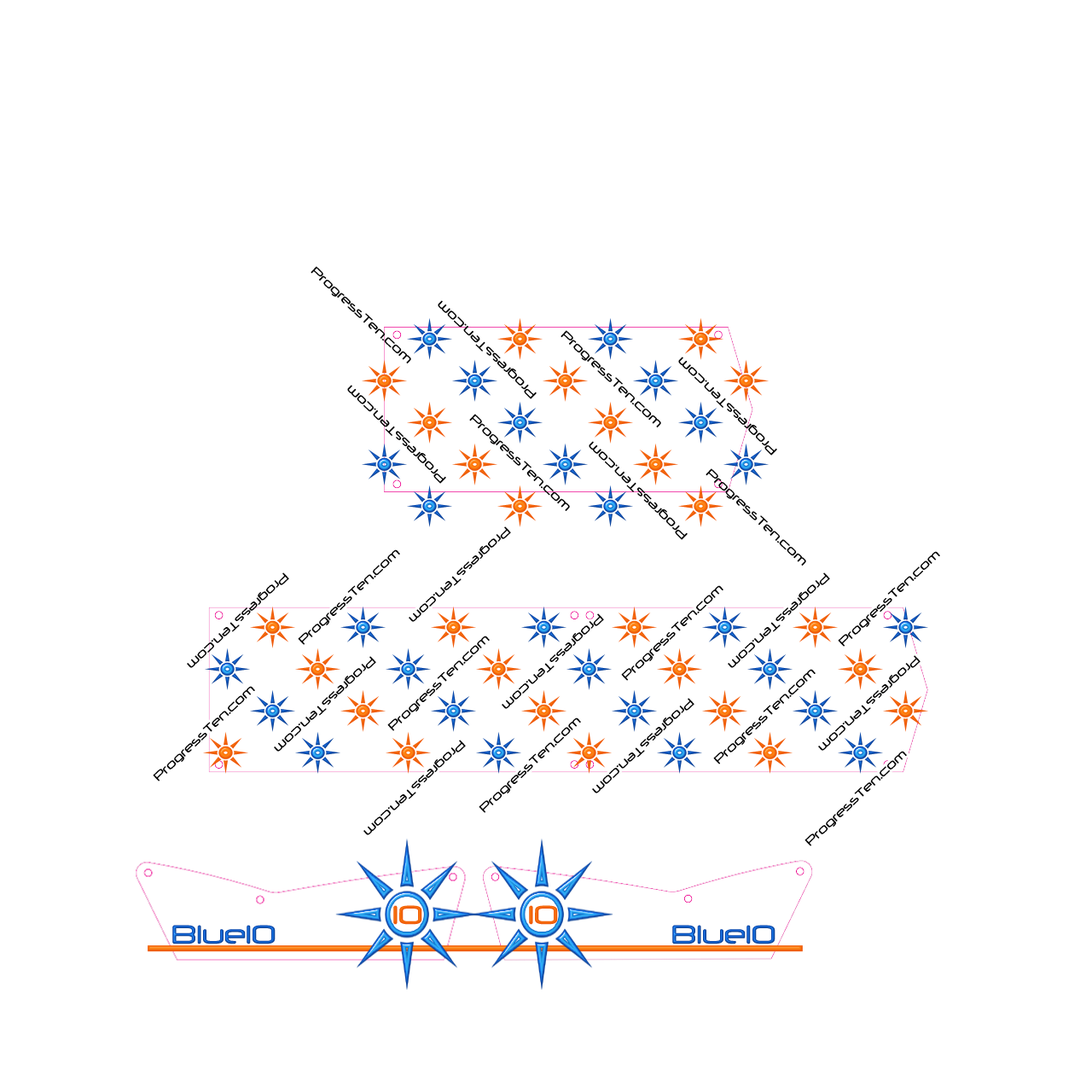
<style>
.page{position:relative;width:1092px;height:1092px;background:#ffffff}
.page>*{position:absolute;margin:0}
.t1{font:14.1px "Neuropol";color:#000000}
.t2{font:30.7px "Neuropol";color:#f2650a}
.t3{font:30.7px "Neuropol"}
</style>
<div class="page">
<p class="t1" style="left:311px;top:266px;width:100px;height:97px;rotate:43deg">ProgressTen.com</p>
<p class="t1" style="left:438px;top:300px;width:99px;height:99px;rotate:-136deg">ProgressTen.com</p>
<p class="t1" style="left:560px;top:330px;width:101px;height:97px;rotate:43deg">ProgressTen.com</p>
<p class="t1" style="left:678px;top:357px;width:99px;height:99px;rotate:-136deg">ProgressTen.com</p>
<p class="t1" style="left:347px;top:385px;width:99px;height:99px;rotate:-136deg">ProgressTen.com</p>
<p class="t1" style="left:469px;top:414px;width:101px;height:97px;rotate:43deg">ProgressTen.com</p>
<p class="t1" style="left:589px;top:441px;width:99px;height:99px;rotate:-136deg">ProgressTen.com</p>
<p class="t1" style="left:706px;top:468px;width:100px;height:98px;rotate:43deg">ProgressTen.com</p>
<p class="t1" style="left:409px;top:526px;width:102px;height:96px;rotate:137deg">ProgressTen.com</p>
<p class="t1" style="left:298px;top:549px;width:102px;height:96px;rotate:-43deg">ProgressTen.com</p>
<p class="t1" style="left:838px;top:551px;width:102px;height:96px;rotate:-43deg">ProgressTen.com</p>
<p class="t1" style="left:187px;top:572px;width:102px;height:96px;rotate:137deg">ProgressTen.com</p>
<p class="t1" style="left:728px;top:572px;width:102px;height:96px;rotate:137deg">ProgressTen.com</p>
<p class="t1" style="left:621px;top:585px;width:102px;height:96px;rotate:-43deg">ProgressTen.com</p>
<p class="t1" style="left:502px;top:613px;width:102px;height:96px;rotate:137deg">ProgressTen.com</p>
<p class="t1" style="left:387px;top:636px;width:103px;height:95px;rotate:-43deg">ProgressTen.com</p>
<p class="t1" style="left:274px;top:656px;width:102px;height:96px;rotate:137deg">ProgressTen.com</p>
<p class="t1" style="left:818px;top:655px;width:103px;height:96px;rotate:137deg">ProgressTen.com</p>
<p class="t1" style="left:713px;top:669px;width:103px;height:95px;rotate:-43deg">ProgressTen.com</p>
<p class="t1" style="left:153px;top:686px;width:102px;height:95px;rotate:-43deg">ProgressTen.com</p>
<p class="t1" style="left:592px;top:698px;width:102px;height:95px;rotate:137deg">ProgressTen.com</p>
<p class="t1" style="left:479px;top:717px;width:102px;height:96px;rotate:-43deg">ProgressTen.com</p>
<p class="t1" style="left:363px;top:740px;width:103px;height:95px;rotate:137deg">ProgressTen.com</p>
<p class="t1" style="left:804px;top:751px;width:103px;height:95px;rotate:-43deg">ProgressTen.com</p>
<p class="t2" style="left:393px;top:905px;width:29px;height:20px">10</p>
<p class="t2" style="left:529px;top:905px;width:29px;height:20px">10</p>
<p class="t3" style="left:172px;top:925px;width:104px;height:19px">Blue10</p>
<p class="t3" style="left:672px;top:925px;width:103px;height:19px">Blue10</p>
</div>
